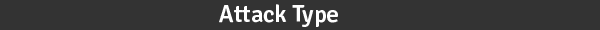
<style>
.page{position:relative;width:600px;height:30px;background:#333333}
.page>*{position:absolute;margin:0}
.t1{font:24px "Signika-Semibold";color:#ffffff}
</style>
<div class="page">
<p class="t1" style="left:219px;top:4px;width:119px;height:23px">Attack Type</p>
</div>
